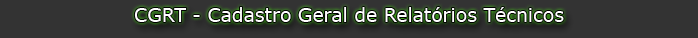
<style>
.page{position:relative;width:698px;height:38px;background:#333333}
.page>*{position:absolute;margin:0}
.t1{font:18.8px "Verdana";color:#ffffff}
</style>
<div class="page">
<p class="t1" style="left:134px;top:7px;width:430px;height:15px">CGRT - Cadastro Geral de Relatórios Técnicos</p>
</div>
